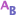
<style>
.page{position:relative;width:16px;height:16px;background:#ffffff}
.page>*{position:absolute;margin:0}
.t1{font:12px "LucidaSans-Demi";color:#b755c0}
.t2{font:12px "LucidaSans-Demi";color:#6b65c0}
</style>
<div class="page">
<p class="t1" style="left:0px;top:0px;width:10px;height:10px">A</p>
<p class="t2" style="left:9px;top:6px;width:7px;height:9px">B</p>
</div>
